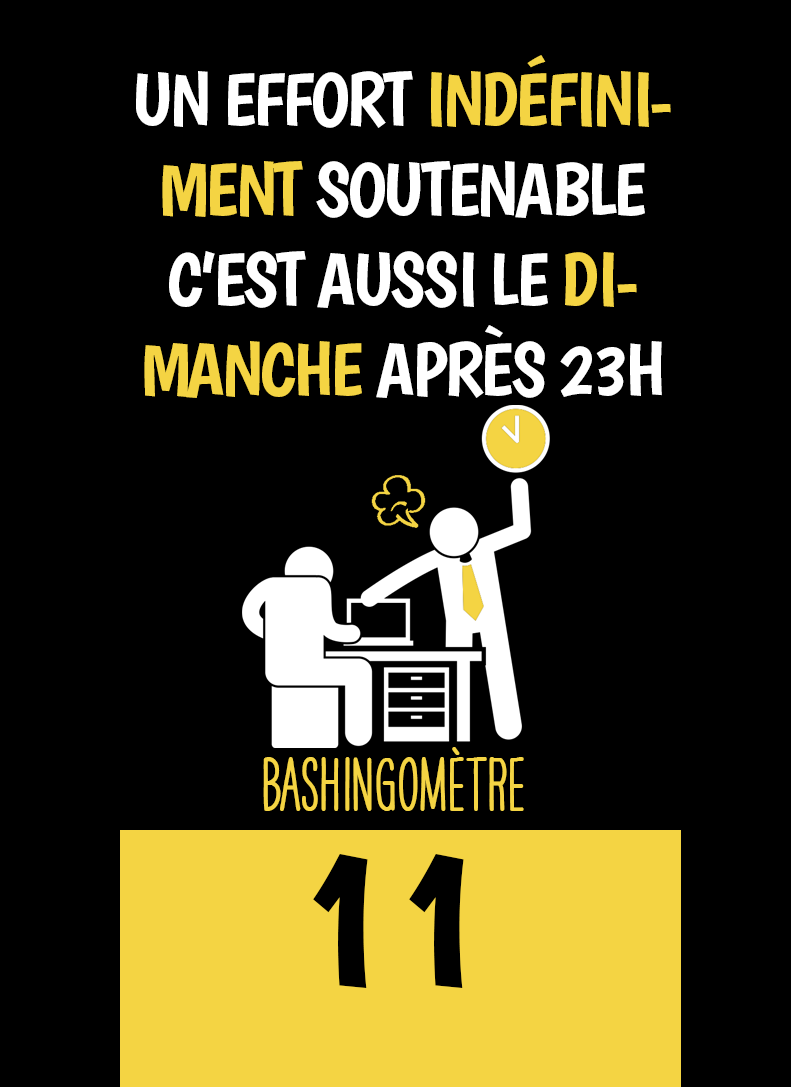
<style>
.page{position:relative;width:791px;height:1087px;background:#000000}
.page>*{position:absolute;margin:0}
.t1{font:75px "Boogaloo-Regular";letter-spacing:-0.04em;color:#ffffff}
.t2{font:75px "Boogaloo-Regular";letter-spacing:-0.04em;color:#f4d443}
.t3{font:66.7px "HAVEANICEDAYTallW04-Bold";color:#f4d443}
.t4{font:200px "Boogaloo-Regular";color:#000000}
</style>
<div class="page">
<p class="t1" style="left:136px;top:55px;width:535px;height:343px;text-align:center">UN EFFORT <span class="t2">INDÉFINIMENT</span> SOUTENABLE C’EST AUSSI LE <span class="t2">DIMANCHE</span> APRÈS 23H</p>
<p class="t3" style="left:263px;top:747px;width:261px;height:64px">BASHINgomètre</p>
<p class="t4" style="left:313px;top:854px;width:151px;height:134px">11</p>
</div>
